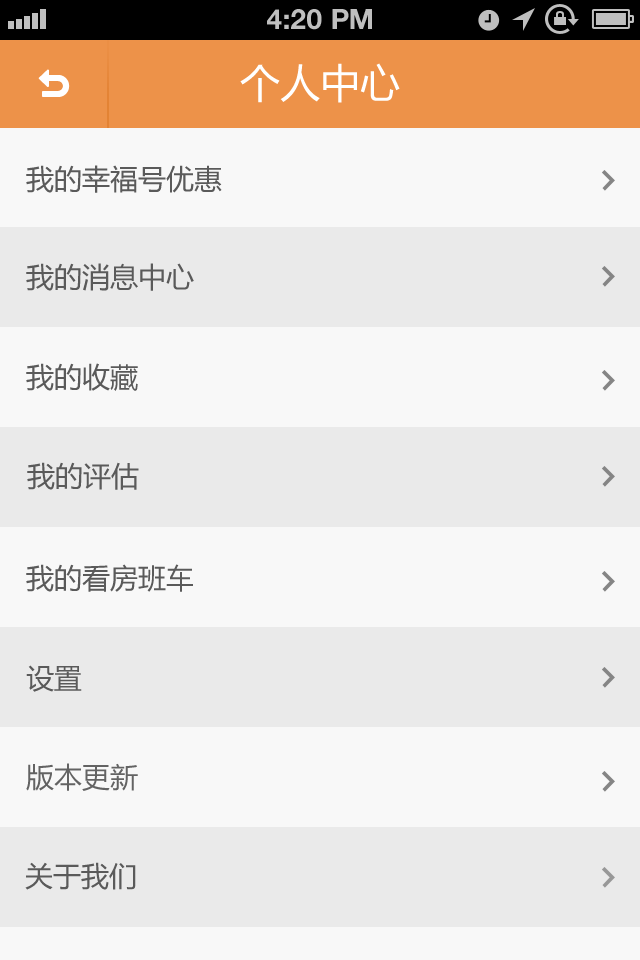
<style>
.page{position:relative;width:640px;height:960px;background:#f8f8f8}
.page>*{position:absolute;margin:0}
.t1{font:28px "HelveticaNeue-Bold";color:#bfbfbf;text-transform:uppercase}
.t2{font:40px "MicrosoftYaHei";color:#ffffff}
.t3{font:28px "MicrosoftYaHei";color:#5a5a5a}
.t4{font:28px "MicrosoftYaHei";color:#636363}
</style>
<div class="page">
<p class="t1" style="left:267px;top:9px;width:105px;height:21px">4:20 PM</p>
<p class="t2" style="left:240px;top:63px;width:160px;height:40px">个人中心</p>
<p class="t3" style="left:26px;top:165px;width:196px;height:28px">我的幸福号优惠</p>
<p class="t3" style="left:26px;top:263px;width:168px;height:28px">我的消息中心</p>
<p class="t3" style="left:26px;top:363px;width:112px;height:28px">我的收藏</p>
<p class="t3" style="left:27px;top:462px;width:112px;height:28px">我的评估</p>
<p class="t3" style="left:26px;top:564px;width:167px;height:28px">我的看房班车</p>
<p class="t3" style="left:26px;top:665px;width:56px;height:27px">设置</p>
<p class="t4" style="left:26px;top:763px;width:112px;height:28px">版本更新</p>
<p class="t3" style="left:25px;top:862px;width:111px;height:28px">关于我们</p>
</div>
